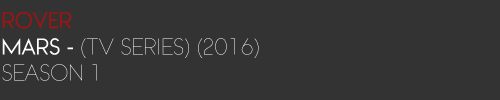
<style>
.page{position:relative;width:500px;height:100px;background:#333333}
.page>*{position:absolute;margin:0}
.t1{font:21.8px "WatchwordThinDemo";color:#ffffff}
.t2{font:21.8px "WatchwordRegularDemo";color:#9f1313}
.t3{font:21.8px "WatchwordRegularDemo";color:#ffffff}
</style>
<div class="page">
<p class="t1" style="left:2px;top:11px;width:257px;height:70px"><span class="t2">ROVER<br></span><span class="t3">MARS - </span>(TV SERIES) (2016) <br>SEASON 1</p>
</div>
